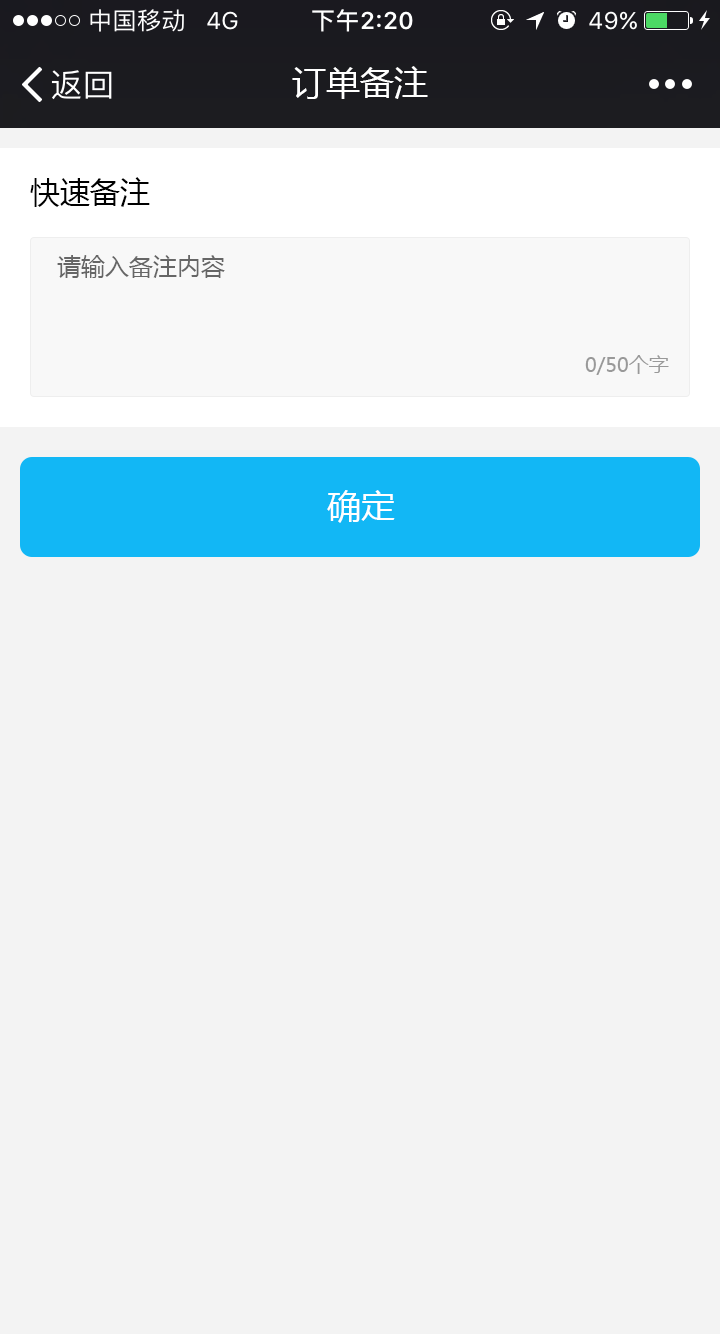
<style>
.page{position:relative;width:720px;height:1334px;background:#f3f3f3}
.page>*{position:absolute;margin:0}
.t1{font:34px "MicrosoftYaHei";color:#ffffff}
.t2{font:30px "MicrosoftYaHei";color:#000000}
.t3{font:24px "MicrosoftYaHei";color:#666666}
.t4{font:20px "MicrosoftYaHei";color:#999999}
</style>
<div class="page">
<p class="t1" style="left:292px;top:66px;width:136px;height:33px">订单备注</p>
<p class="t2" style="left:30px;top:177px;width:120px;height:30px">快速备注</p>
<p class="t3" style="left:57px;top:255px;width:168px;height:23px">请输入备注内容</p>
<p class="t4" style="left:585px;top:355px;width:84px;height:20px">0/50个字</p>
<p class="t1" style="left:327px;top:490px;width:68px;height:33px">确定</p>
</div>
